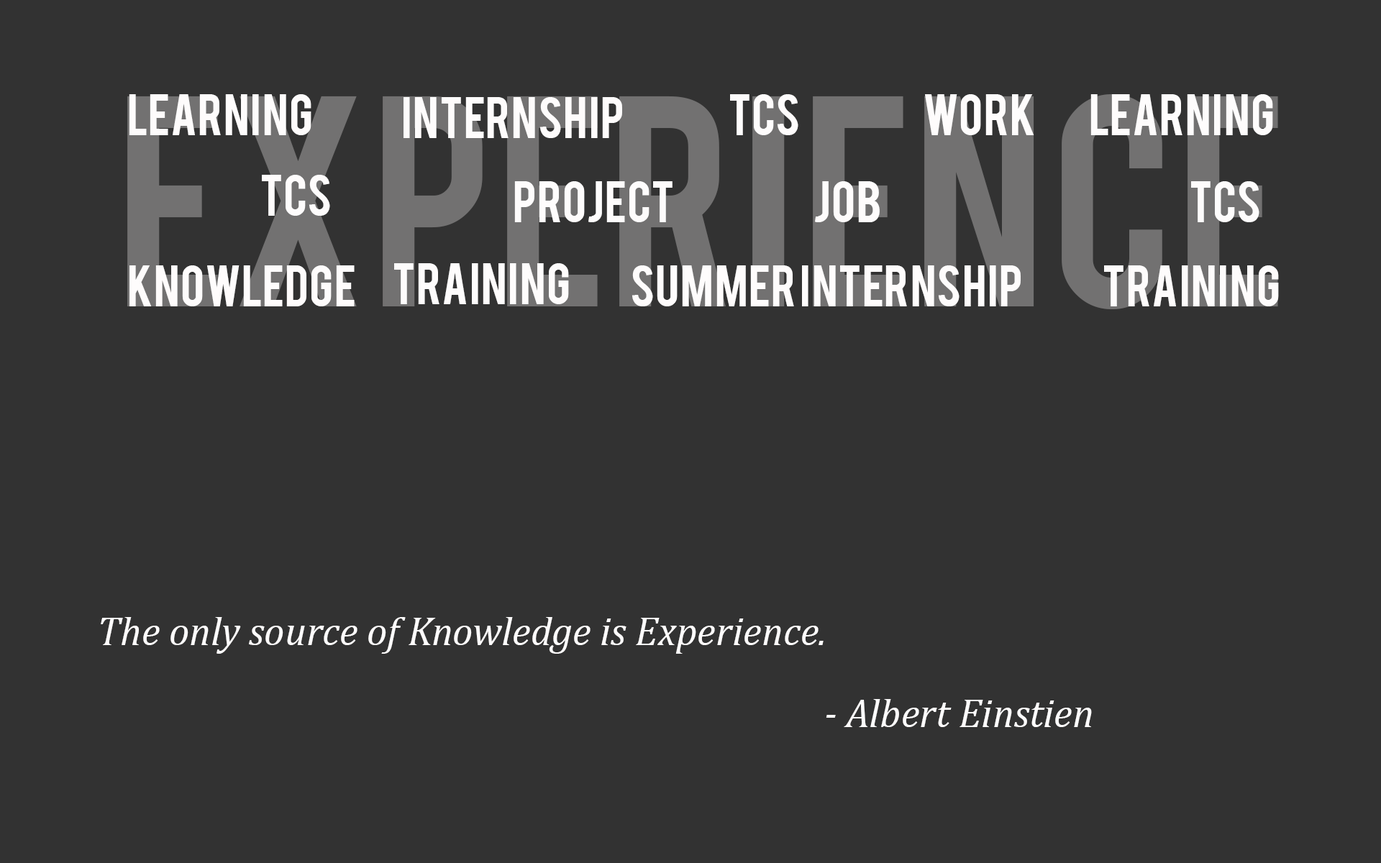
<style>
.page{position:relative;width:1381px;height:863px;background:#323232}
.page>*{position:absolute;margin:0}
.t1{font:236px "Bebas";color:#727171}
.t2{font:46px "Bebas";color:#fefcfc}
.t3{font:40.3px "Cambria-Italic";color:#fefcfc}
</style>
<div class="page">
<p class="t1" style="left:127px;top:94px;width:1151px;height:215px">experience</p>
<p class="t2" style="left:129px;top:94px;width:183px;height:41px">learning</p>
<p class="t2" style="left:404px;top:97px;width:218px;height:41px">internship</p>
<p class="t2" style="left:730px;top:94px;width:69px;height:41px">TCS</p>
<p class="t2" style="left:925px;top:94px;width:110px;height:41px">work</p>
<p class="t2" style="left:1091px;top:94px;width:182px;height:41px">learning</p>
<p class="t2" style="left:262px;top:175px;width:68px;height:41px">TCS</p>
<p class="t2" style="left:514px;top:181px;width:159px;height:41px">project</p>
<p class="t2" style="left:815px;top:181px;width:65px;height:41px">job</p>
<p class="t2" style="left:1191px;top:181px;width:69px;height:41px">TCS</p>
<p class="t2" style="left:129px;top:265px;width:226px;height:41px">knowledge</p>
<p class="t2" style="left:394px;top:263px;width:175px;height:41px">training</p>
<p class="t2" style="left:632px;top:265px;width:389px;height:41px">summer internship</p>
<p class="t2" style="left:1104px;top:265px;width:175px;height:41px">training</p>
<p class="t3" style="left:101px;top:617px;width:723px;height:37px">The only source of Knowledge is Experience.</p>
<p class="t3" style="left:826px;top:699px;width:266px;height:28px">- Albert Einstien</p>
</div>
